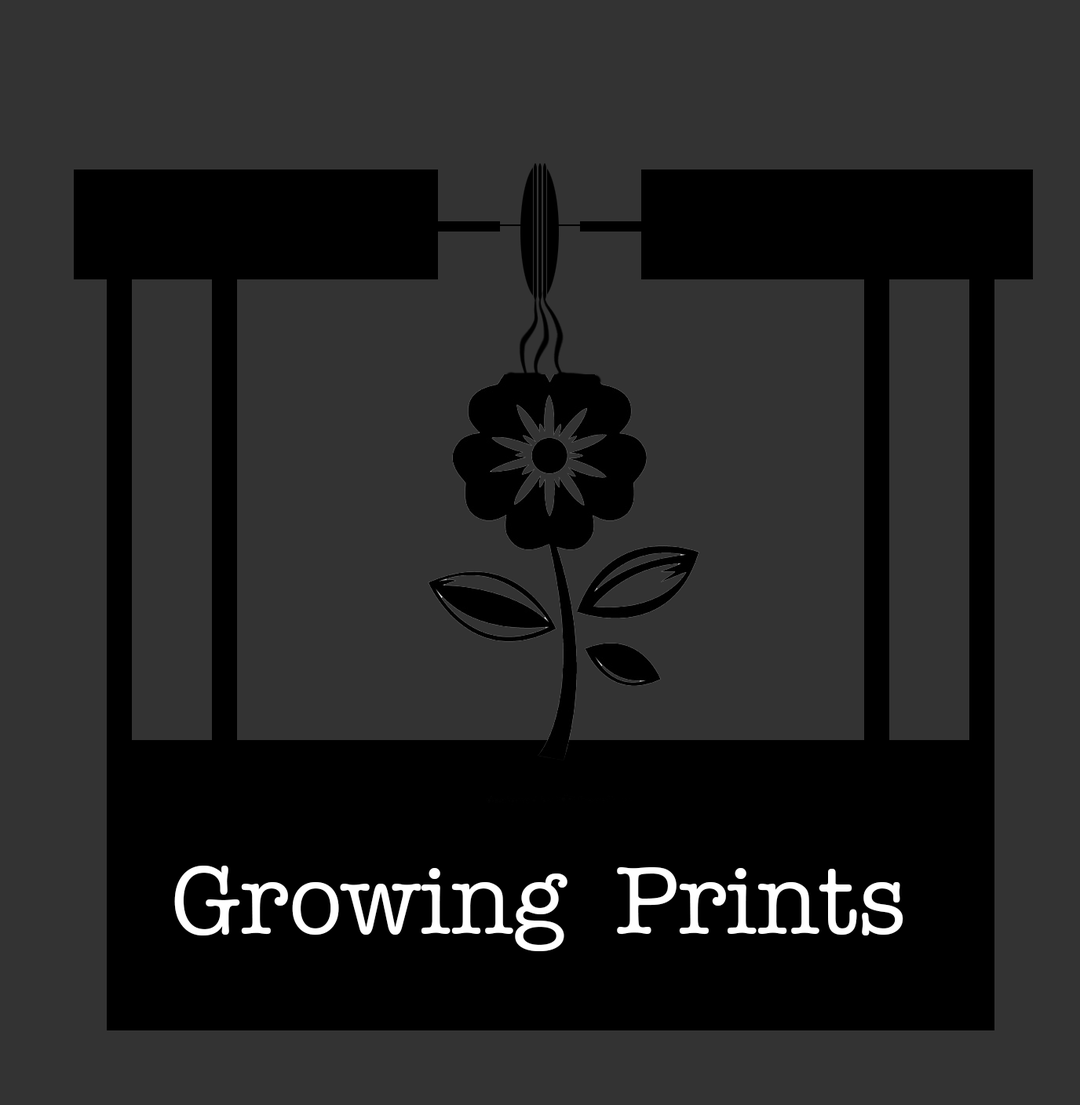
<style>
.page{position:relative;width:1080px;height:1105px;background:#333333}
.page>*{position:absolute;margin:0}
.t1{font:98.1px "AmericanTypewriter";color:#ffffff}
</style>
<div class="page">
<p class="t1" style="left:174px;top:865px;width:729px;height:86px">Growing  Prints</p>
</div>
